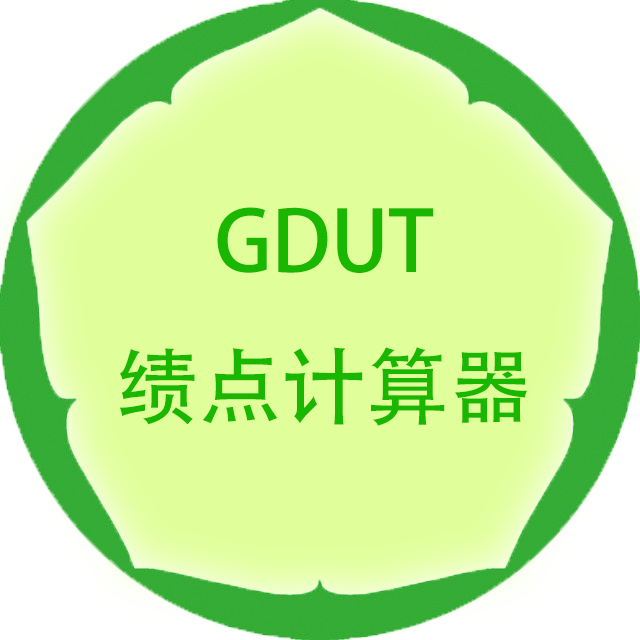
<style>
.page{position:relative;width:640px;height:640px;background:#e0ff9b}
.page>*{position:absolute;margin:0}
.t1{font:83.3px "AdobeHeitiStd-Regular";color:#1ab700}
</style>
<div class="page">
<p class="t1" style="left:119px;top:207px;width:409px;height:219px;text-align:center">GDUT<br>绩点计算器</p>
</div>
